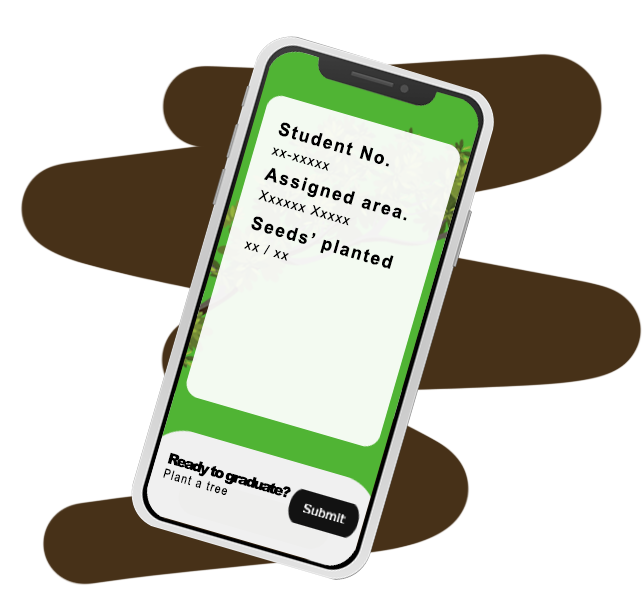
<style>
.page{position:relative;width:643px;height:611px;background:#ffffff}
.page>*{position:absolute;margin:0}
.t1{font:18.4px "Arial-BoldMT";letter-spacing:0.1em;color:#000000;scale:0.96 1}
.t2{font:13.5px "ArialMT";letter-spacing:0.1em;color:#000000;scale:0.96 1}
.t3{font:14.8px "Arial-Black";letter-spacing:-0.12em;color:#000000}
.t4{font:13px "ArialNarrow";letter-spacing:0.1em;color:#000000;scale:0.96 1}
.t5{font:13px "Arial-Black";letter-spacing:0.1em;color:#000000;scale:0.96 1}
</style>
<div class="page">
<p class="t1" style="left:278px;top:122px;width:111px;height:45px;rotate:16deg">Student No.</p>
<p class="t2" style="left:271px;top:147px;width:59px;height:24px;rotate:16deg">xx-xxxxx</p>
<p class="t1" style="left:264px;top:167px;width:143px;height:54px;rotate:16deg">Assigned area.</p>
<p class="t2" style="left:258px;top:189px;width:93px;height:37px;rotate:16deg">Xxxxxx Xxxxx</p>
<p class="t1" style="left:251px;top:216px;width:143px;height:53px;rotate:16deg">Seeds’ planted</p>
<p class="t2" style="left:244px;top:241px;width:45px;height:20px;rotate:16deg">xx / xx</p>
<p class="t3" style="left:163px;top:452px;width:128px;height:46px;rotate:16deg">Ready to graduate?<br><span class="t4">Plant a tree</span><span class="t5"></span></p>
</div>
